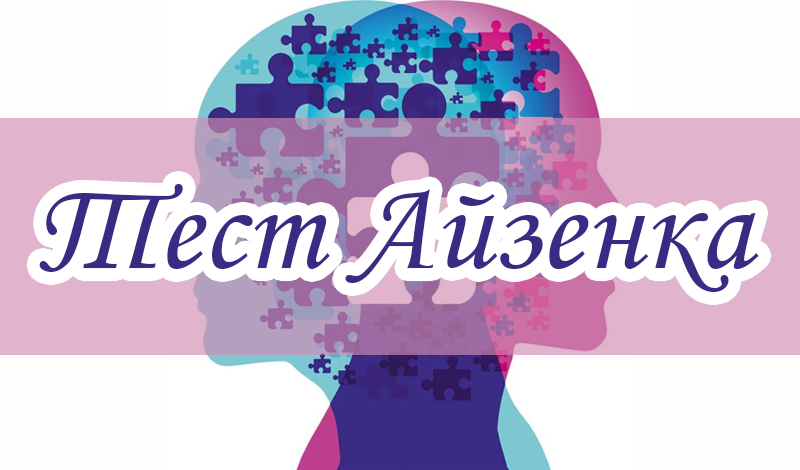
<style>
.page{position:relative;width:800px;height:470px;background:#ffffff}
.page>*{position:absolute;margin:0}
.t1{font:128.5px "MonotypeCorsiva";color:#3b2a84}
</style>
<div class="page">
<p class="t1" style="left:39px;top:184px;width:720px;height:108px">Тест Айзенка</p>
</div>
